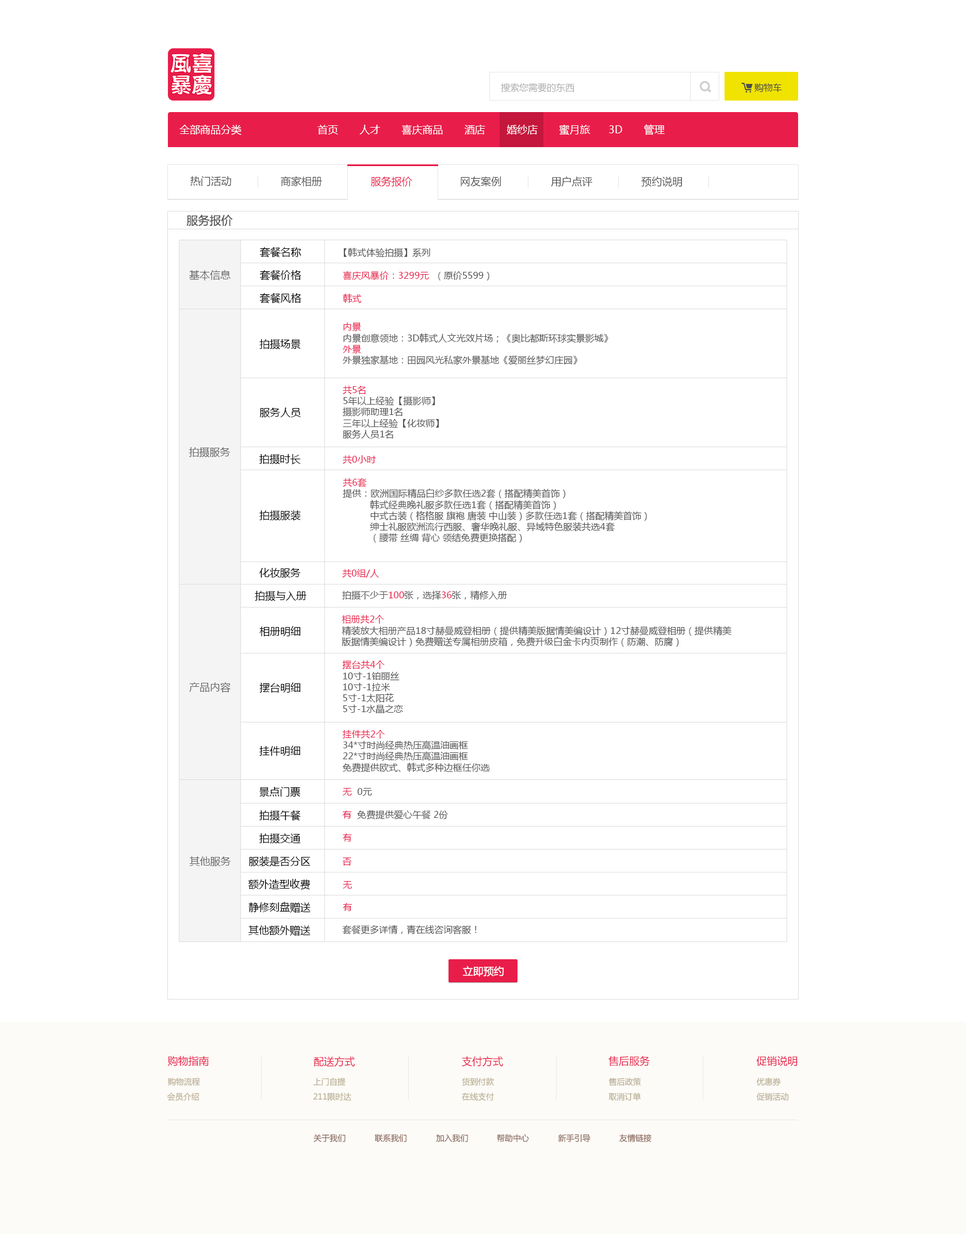
<style>
.page{position:relative;width:966px;height:1234px;background:#ffffff}
.page>*{position:absolute;margin:0}
.t1{font:9.2px "MicrosoftYaHei";color:#afafaf}
.t2{font:9.2px "MicrosoftYaHei";color:#4d4d4d}
.t3{font:10.3px "MicrosoftYaHei";color:#ffffff}
.t4{font:10.3px "MicrosoftYaHei";color:#545454}
.t5{font:10.3px "MicrosoftYaHei";color:#e91d4a}
.t6{font:11.5px "MicrosoftYaHei";color:#545454}
.t7{font:9.2px "MicrosoftYaHei";color:#545454}
.t8{font:10.3px "MicrosoftYaHei";color:#010101}
.t9{font:10.3px "MicrosoftYaHei";color:#676767}
.t10{font:9.2px "MicrosoftYaHei";letter-spacing:0.004em;color:#e91d4a}
.t11{font:10.3px "MicrosoftYaHei";letter-spacing:0.004em;color:#010101}
.t12{font:10.3px "MicrosoftYaHei";letter-spacing:0.006em;color:#000000}
.t13{font:9.2px "MicrosoftYaHei";letter-spacing:0.006em;color:#e91d4a}
.t14{font:9.2px "MicrosoftYaHei";color:#e91d4a}
.t15{font:10.3px "MicrosoftYaHei";color:#000000}
.t16{font:8px "MicrosoftYaHei";color:#baad93}
.t17{font:8px "MicrosoftYaHei";color:#8c6a5e}
</style>
<div class="page">
<p class="t1" style="left:501px;top:83px;width:73px;height:10px">搜索您需要的东西</p>
<p class="t2" style="left:754px;top:83px;width:28px;height:9px">购物车</p>
<p class="t3" style="left:179px;top:125px;width:62px;height:10px">全部商品分类</p>
<p class="t3" style="left:317px;top:124px;width:348px;height:11px">首页       人才       喜庆商品       酒店       婚纱店       蜜月旅      3D       管理</p>
<p class="t4" style="left:190px;top:176px;width:41px;height:10px">热门活动</p>
<p class="t4" style="left:281px;top:176px;width:41px;height:11px">商家相册</p>
<p class="t5" style="left:371px;top:177px;width:41px;height:10px">服务报价</p>
<p class="t4" style="left:461px;top:177px;width:40px;height:10px">网友案例</p>
<p class="t4" style="left:551px;top:177px;width:41px;height:10px">用户点评</p>
<p class="t4" style="left:641px;top:177px;width:41px;height:10px">预约说明</p>
<p class="t6" style="left:186px;top:214px;width:47px;height:13px">服务报价</p>
<p class="t7" style="left:259px;top:247px;width:171px;height:11px"><span class="t8">套餐名称           </span>【韩式体验拍摄】系列</p>
<p class="t9" style="left:189px;top:270px;width:42px;height:11px">基本信息</p>
<p class="t10" style="left:259px;top:270px;width:230px;height:11px"><span class="t11">套餐价格            </span>喜庆风暴价：3299元 <span class="t7"> （原价5599）</span></p>
<p class="t12" style="left:259px;top:293px;width:103px;height:11px">套餐风格            <span class="t13">韩式</span></p>
<p class="t7" style="left:343px;top:323px;width:265px;height:42px"><span class="t14">内景<br></span>内景创意领地：3D韩式人文光效片场；《奥比都斯环球实景影城》<br><span class="t14">外景<br></span>外景独家基地：田园风光私家外景基地《爱丽丝梦幻庄园》</p>
<p class="t15" style="left:259px;top:339px;width:42px;height:11px">拍摄场景</p>
<p class="t7" style="left:343px;top:386px;width:96px;height:53px"><span class="t14">共5名<br></span>5年以上经验【摄影师】<br>摄影师助理1名<br>三年以上经验【化妆师】<br>服务人员1名</p>
<p class="t15" style="left:259px;top:408px;width:42px;height:9px">服务人员</p>
<p class="t9" style="left:189px;top:447px;width:42px;height:11px">拍摄服务</p>
<p class="t15" style="left:259px;top:454px;width:42px;height:11px">拍摄时长</p>
<p class="t14" style="left:343px;top:455px;width:33px;height:9px">共0小时</p>
<p class="t7" style="left:343px;top:478px;width:304px;height:65px"><span class="t14">共6套<br></span>提供：欧洲国际精品白纱多款任选2套（搭配精美首饰）<br>          韩式经典晚礼服多款任选1套（搭配精美首饰）<br>          中式古装（格格服 旗袍 唐装 中山装）多款任选1套（搭配精美首饰）<br>          绅士礼服欧洲流行西服、奢华晚礼服、异域特色服装共选4套<br>          （腰带 丝绸 背心 领结免费更换搭配）</p>
<p class="t15" style="left:259px;top:510px;width:42px;height:11px">拍摄服装</p>
<p class="t15" style="left:259px;top:568px;width:42px;height:10px">化妆服务</p>
<p class="t14" style="left:342px;top:569px;width:37px;height:9px">共0组/人</p>
<p class="t15" style="left:255px;top:591px;width:51px;height:10px">拍摄与入册</p>
<p class="t7" style="left:342px;top:590px;width:165px;height:10px">拍摄不少于<span class="t14">100</span>张，选择<span class="t14">36</span>张，精修入册</p>
<p class="t7" style="left:342px;top:615px;width:389px;height:32px"><span class="t14">相册共2个<br></span>精装放大相册产品18寸赫曼威登相册（提供精美版据情美编设计）12寸赫曼威登相册（提供精美<br>版据情美编设计）免费赠送专属相册皮箱，免费升级白金卡内页制作（防潮、防腐）</p>
<p class="t15" style="left:259px;top:626px;width:42px;height:10px">相册明细</p>
<p class="t7" style="left:342px;top:660px;width:61px;height:54px"><span class="t14">摆台共4个<br></span>10寸-1铂丽丝<br>10寸-1拉米<br>5寸-1太阳花<br>5寸-1水晶之恋</p>
<p class="t9" style="left:189px;top:682px;width:42px;height:11px">产品内容</p>
<p class="t15" style="left:259px;top:682px;width:42px;height:11px">摆台明细</p>
<p class="t7" style="left:342px;top:730px;width:148px;height:43px"><span class="t14">挂件共2个<br></span>34*寸时尚经典热压高温油画框<br>22*寸时尚经典热压高温油画框<br>免费提供欧式、韩式多种边框任你选</p>
<p class="t15" style="left:259px;top:746px;width:41px;height:10px">挂件明细</p>
<p class="t15" style="left:259px;top:787px;width:41px;height:10px">景点门票</p>
<p class="t7" style="left:343px;top:788px;width:29px;height:8px"><span class="t14">无</span>  0元</p>
<p class="t15" style="left:259px;top:810px;width:42px;height:11px">拍摄午餐</p>
<p class="t7" style="left:342px;top:810px;width:106px;height:10px"><span class="t14">有</span>  免费提供爱心午餐 2份</p>
<p class="t15" style="left:259px;top:834px;width:42px;height:10px">拍摄交通</p>
<p class="t14" style="left:343px;top:834px;width:9px;height:8px">有</p>
<p class="t9" style="left:189px;top:857px;width:42px;height:9px">其他服务</p>
<p class="t15" style="left:248px;top:856px;width:62px;height:11px">服装是否分区</p>
<p class="t14" style="left:342px;top:858px;width:10px;height:8px">否</p>
<p class="t15" style="left:248px;top:879px;width:62px;height:11px">额外造型收费</p>
<p class="t14" style="left:343px;top:881px;width:9px;height:8px">无</p>
<p class="t15" style="left:248px;top:902px;width:62px;height:11px">静修刻盘赠送</p>
<p class="t14" style="left:343px;top:903px;width:9px;height:8px">有</p>
<p class="t15" style="left:248px;top:926px;width:62px;height:10px">其他额外赠送</p>
<p class="t7" style="left:342px;top:925px;width:135px;height:10px">套餐更多详情，青在线咨询客服！</p>
<p class="t3" style="left:463px;top:966px;width:41px;height:11px">立即预约</p>
<p class="t5" style="left:167px;top:1056px;width:42px;height:11px">购物指南</p>
<p class="t5" style="left:313px;top:1057px;width:42px;height:10px">配送方式</p>
<p class="t5" style="left:462px;top:1057px;width:41px;height:10px">支付方式</p>
<p class="t5" style="left:608px;top:1056px;width:42px;height:11px">售后服务</p>
<p class="t5" style="left:756px;top:1056px;width:41px;height:11px">促销说明</p>
<p class="t16" style="left:168px;top:1078px;width:32px;height:8px">购物流程</p>
<p class="t16" style="left:313px;top:1078px;width:33px;height:8px">上门自提</p>
<p class="t16" style="left:462px;top:1078px;width:32px;height:9px">货到付款</p>
<p class="t16" style="left:608px;top:1078px;width:33px;height:8px">售后政策</p>
<p class="t16" style="left:756px;top:1078px;width:25px;height:8px">优惠券</p>
<p class="t16" style="left:167px;top:1093px;width:32px;height:9px">会员介绍</p>
<p class="t16" style="left:313px;top:1093px;width:39px;height:9px">211限时达</p>
<p class="t16" style="left:462px;top:1093px;width:32px;height:8px">在线支付</p>
<p class="t16" style="left:608px;top:1093px;width:33px;height:9px">取消订单</p>
<p class="t16" style="left:756px;top:1093px;width:33px;height:8px">促销活动</p>
<p class="t17" style="left:313px;top:1134px;width:33px;height:8px">关于我们</p>
<p class="t17" style="left:374px;top:1134px;width:33px;height:8px">联系我们</p>
<p class="t17" style="left:436px;top:1134px;width:32px;height:8px">加入我们</p>
<p class="t17" style="left:497px;top:1134px;width:32px;height:9px">帮助中心</p>
<p class="t17" style="left:558px;top:1134px;width:32px;height:8px">新手引导</p>
<p class="t17" style="left:619px;top:1134px;width:32px;height:8px">友情链接</p>
</div>
